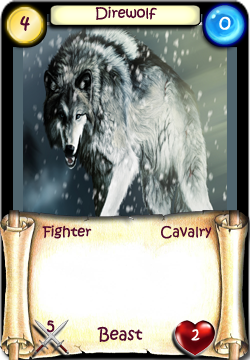
<style>
.page{position:relative;width:250px;height:360px}
.page>*{position:absolute;margin:0}
.t1{font:14px "KristenITC-Regular";color:#51092d}
.t2{font:20px "KristenITC-Regular";color:#51092d}
.t3{font:20px "KristenITC-Regular";color:#ffffff}
.t4{font:16px "KristenITC-Regular";color:#51092d}
.t5{font:16px "KristenITC-Regular";color:#fefefe}
</style>
<div class="page">
<p class="t1" style="left:95px;top:6px;width:62px;height:14px">Direwolf</p>
<p class="t2" style="left:20px;top:16px;width:10px;height:15px">4</p>
<p class="t3" style="left:219px;top:16px;width:12px;height:14px">0</p>
<p class="t1" style="left:42px;top:225px;width:50px;height:14px">Fighter</p>
<p class="t1" style="left:161px;top:225px;width:51px;height:14px">Cavalry</p>
<p class="t4" style="left:46px;top:320px;width:9px;height:13px">5</p>
<p class="t4" style="left:97px;top:326px;width:46px;height:16px">Beast</p>
<p class="t5" style="left:191px;top:329px;width:9px;height:12px">2</p>
</div>
